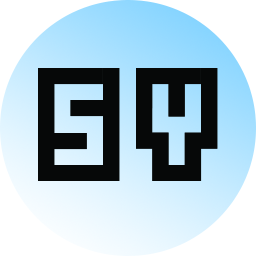
<style>
.page{position:relative;width:256px;height:256px;background:#ffffff}
.page>*{position:absolute;margin:0}
.t1{font:130.4px "GrixelAcme5CompCapsO";color:#060808}
</style>
<div class="page">
<p class="t1" style="left:38px;top:68px;width:180px;height:113px">SY</p>
</div>
